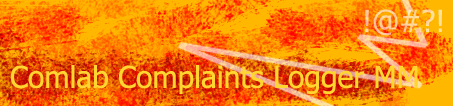
<style>
.page{position:relative;width:453px;height:106px}
.page>*{position:absolute;margin:0}
.t1{font:30px "Tahoma";color:#ffd599}
.t2{font:30px "Tahoma";color:#ffd52f}
</style>
<div class="page">
<p class="t1" style="left:365px;top:9px;width:77px;height:27px">!@#?!</p>
<p class="t2" style="left:10px;top:65px;width:408px;height:29px">Comlab Complaints Logger MM</p>
</div>
